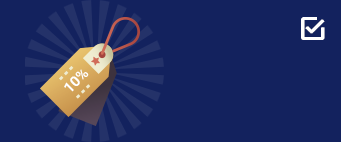
<style>
.page{position:relative;width:341px;height:142px;background:#13225e}
.page>*{position:absolute;margin:0}
.t1{font:15px "Roboto-Bold";color:#ffffff}
</style>
<div class="page">
<p class="t1" style="left:64px;top:69px;width:25px;height:23px;rotate:-45deg">10%</p>
</div>
